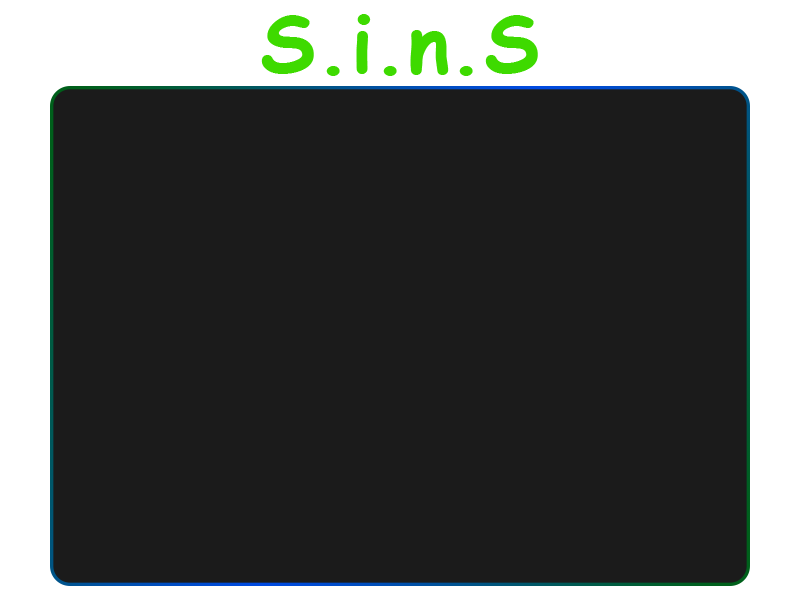
<style>
.page{position:relative;width:800px;height:600px;background:#1b1b1b}
.page>*{position:absolute;margin:0}
.t1{font:80px "ComicSansMS-Bold";color:#3eda00}
</style>
<div class="page">
<p class="t1" style="left:261px;top:14px;width:277px;height:62px">S.i.n.S</p>
</div>
